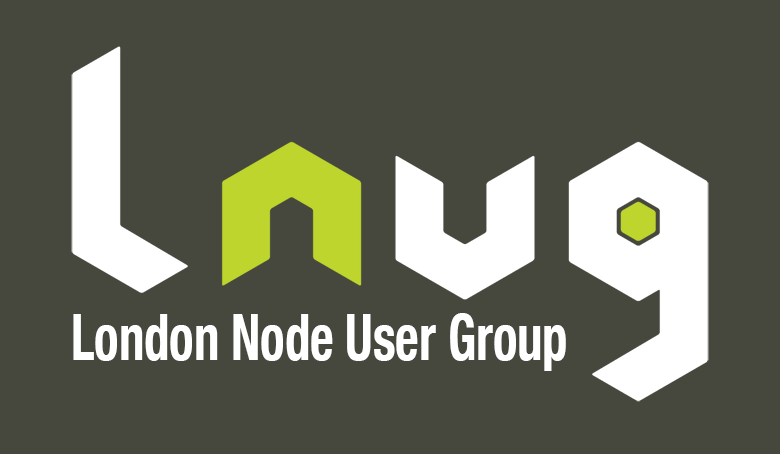
<style>
.page{position:relative;width:780px;height:454px;background:#46483e}
.page>*{position:absolute;margin:0}
.t1{font:64.4px "HelveticaNeue-CondensedBold";color:#ffffff;scale:0.79 1}
</style>
<div class="page">
<p class="t1" style="left:73px;top:313px;width:493px;height:58px">London Node User Group</p>
</div>
